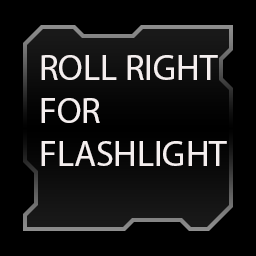
<style>
.page{position:relative;width:256px;height:256px;background:#000000}
.page>*{position:absolute;margin:0}
.t1{font:36px "MyriadPro-Regular";color:#f4eeee}
</style>
<div class="page">
<p class="t1" style="left:41px;top:55px;width:186px;height:111px">ROLL RIGHT<br>FOR<br>FLASHLIGHT</p>
</div>
